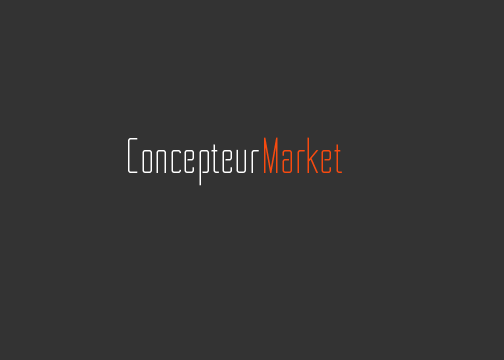
<style>
.page{position:relative;width:504px;height:360px;background:#333333}
.page>*{position:absolute;margin:0}
.t1{font:48px "Shket-Regular";color:#ffffff}
.t2{font:48px "Shket-Regular";color:#f84a0f}
</style>
<div class="page">
<p class="t1" style="left:128px;top:137px;width:214px;height:49px">Concepteur<span class="t2">Market</span></p>
</div>
